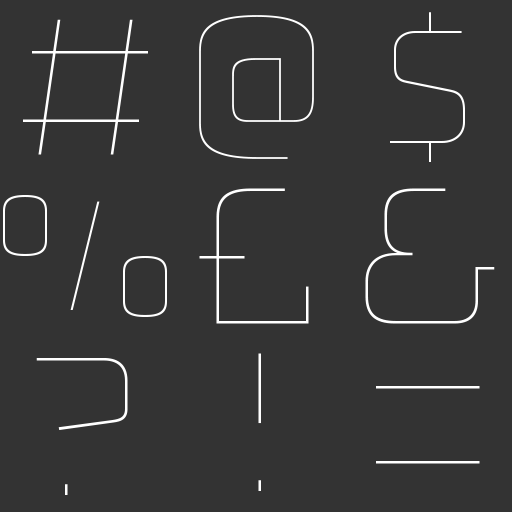
<style>
.page{position:relative;width:512px;height:512px;background:#333333}
.page>*{position:absolute;margin:0}
.t1{font:175px "Bungee-Hairline";color:#ffffff}
.t2{font:208.3px "Bungee-Hairline";color:#ffffff}
.t3{font:250px "Bungee-Hairline";color:#ffffff}
.t4{font:200px "Bungee-Hairline";color:#ffffff}
</style>
<div class="page">
<p class="t1" style="left:199px;top:15px;width:115px;height:144px">@</p>
<p class="t2" style="left:390px;top:12px;width:75px;height:150px">$</p>
<p class="t3" style="left:23px;top:19px;width:125px;height:136px">#</p>
<p class="t4" style="left:3px;top:195px;width:164px;height:122px">%</p>
<p class="t3" style="left:199px;top:188px;width:110px;height:136px">£</p>
<p class="t3" style="left:365px;top:188px;width:130px;height:136px">&amp;</p>
<p class="t3" style="left:258px;top:353px;width:3px;height:138px">!</p>
<p class="t3" style="left:36px;top:358px;width:92px;height:137px">?</p>
<p class="t3" style="left:376px;top:386px;width:104px;height:78px">=</p>
</div>
